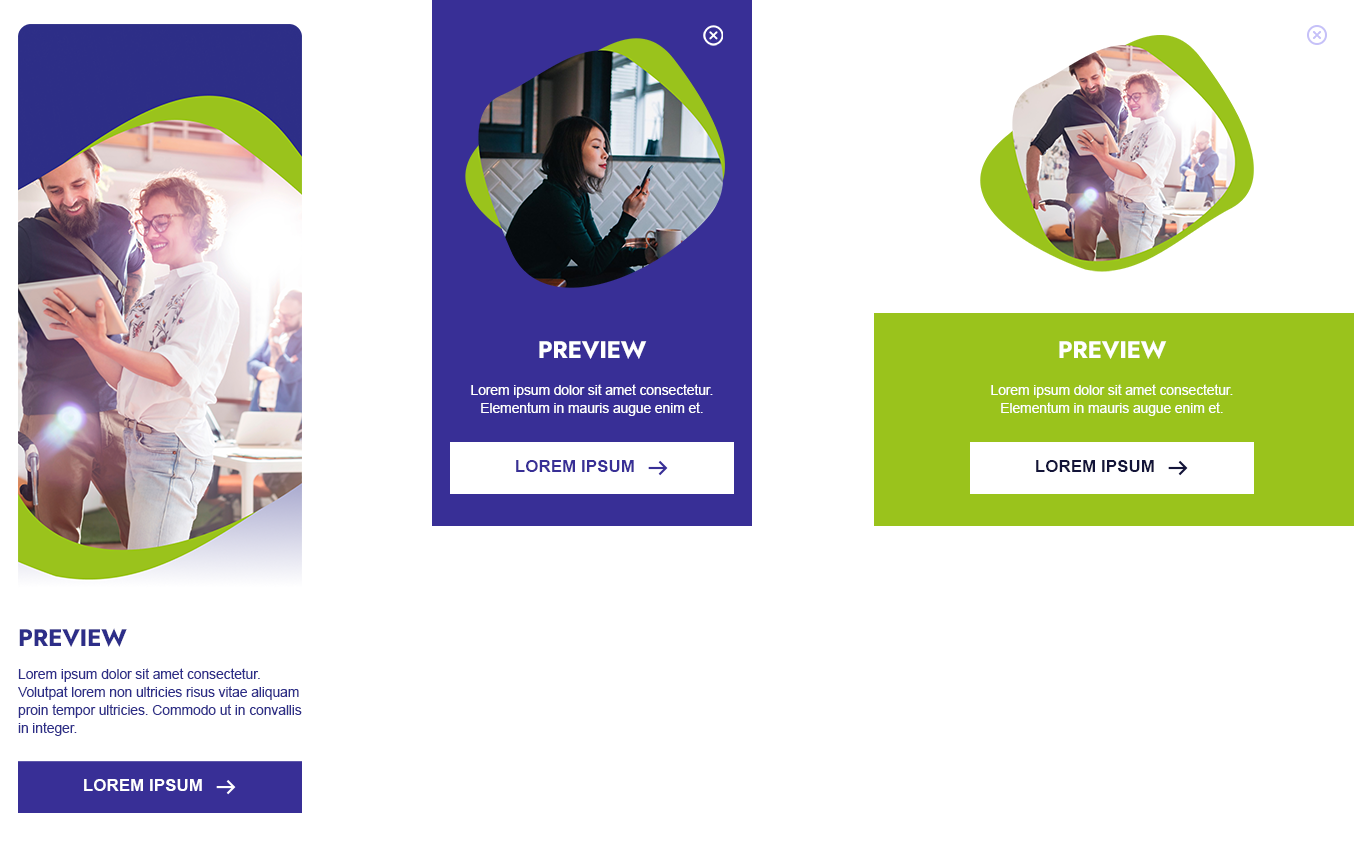
<style>
.page{position:relative;width:1354px;height:850px;background:#ffffff}
.page>*{position:absolute;margin:0}
.t1{font:24px "Jost-Bold";letter-spacing:-0.01em;color:#ffffff}
.t2{font:14px/18px "ArialMT";letter-spacing:-0.01em;color:#ffffff}
.t3{font:17.1px "Arial-BoldMT";color:#382f96;text-transform:uppercase}
.t4{font:17.1px "Arial-BoldMT";color:#131439;text-transform:uppercase}
.t5{font:24px "Jost-Bold";letter-spacing:-0.01em;color:#2d2e88}
.t6{font:14px/18px "ArialMT";letter-spacing:-0.01em;color:#2d2e88}
.t7{font:17px "Arial-BoldMT";color:#ffffff;text-transform:uppercase}
</style>
<div class="page">
<p class="t1" style="left:539px;top:340px;width:108px;height:19px">PREVIEW</p>
<p class="t1" style="left:1059px;top:340px;width:108px;height:19px">PREVIEW</p>
<p class="t2" style="left:471px;top:384px;width:242px;height:32px;text-align:center">Lorem ipsum dolor sit amet consectetur. Elementum in mauris augue enim et.</p>
<p class="t2" style="left:991px;top:384px;width:242px;height:32px;text-align:center">Lorem ipsum dolor sit amet consectetur. Elementum in mauris augue enim et.</p>
<p class="t3" style="left:516px;top:460px;width:118px;height:12px">Lorem ipsum</p>
<p class="t4" style="left:1036px;top:460px;width:118px;height:12px">Lorem ipsum</p>
<p class="t5" style="left:19px;top:628px;width:108px;height:19px">PREVIEW</p>
<p class="t6" style="left:18px;top:668px;width:284px;height:68px">Lorem ipsum dolor sit amet consectetur. Volutpat lorem non ultricies risus vitae aliquam proin tempor ultricies. Commodo ut in convallis in integer.</p>
<p class="t7" style="left:84px;top:779px;width:118px;height:12px">Lorem ipsum</p>
</div>
